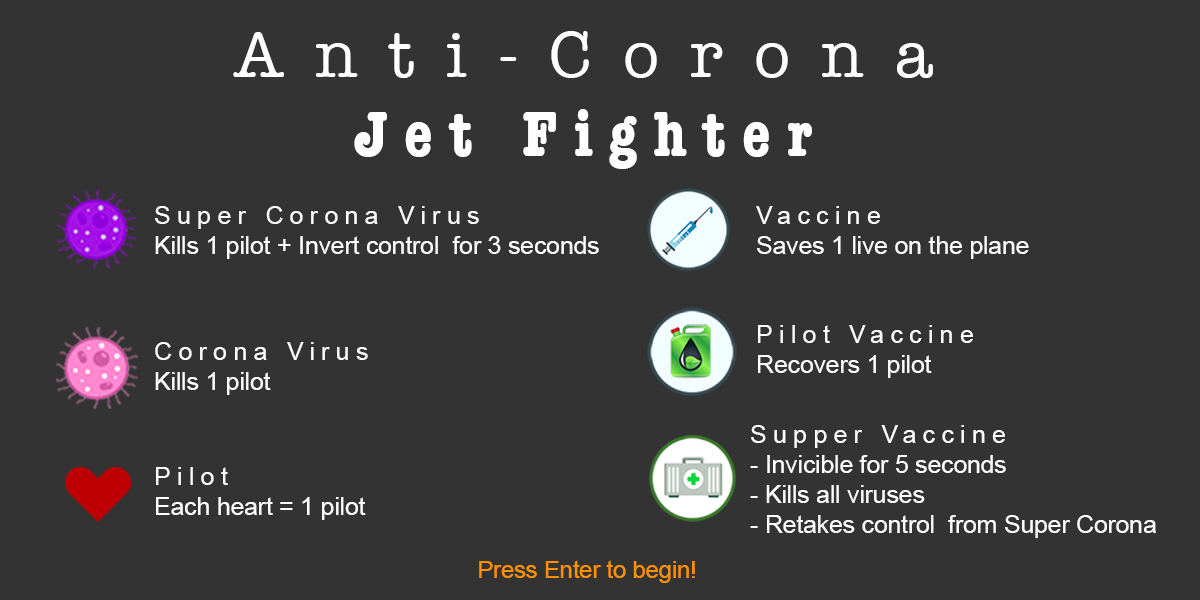
<style>
.page{position:relative;width:1200px;height:600px;background:#333333}
.page>*{position:absolute;margin:0}
.t1{font:66.3px "AmericanTypewriter";letter-spacing:0.47em;color:#ffffff}
.t2{font:66.3px "AmericanTypewriter-CondensedBold";letter-spacing:0.25em;color:#ffffff}
.t3{font:25px "ArialMT";letter-spacing:-0.01em;color:#ffffff}
.t4{font:25px "ArialMT";letter-spacing:0.25em;color:#ffffff}
.t5{font:24px "ArialMT";letter-spacing:-0.01em;color:#ff9000}
</style>
<div class="page">
<p class="t1" style="left:233px;top:31px;width:700px;height:138px;text-align:center">Anti-Corona<br><span class="t2">Jet Fighter</span></p>
<p class="t3" style="left:155px;top:206px;width:444px;height:53px"><span class="t4">Super Corona Virus<br></span>Kills 1 pilot + Invert control  for 3 seconds</p>
<p class="t3" style="left:756px;top:206px;width:273px;height:53px"><span class="t4">Vaccine<br></span>Saves 1 live on the plane</p>
<p class="t3" style="left:758px;top:325px;width:215px;height:53px"><span class="t4">Pilot Vaccine<br></span>Recovers 1 pilot</p>
<p class="t3" style="left:155px;top:342px;width:213px;height:53px"><span class="t4">Corona Virus<br></span>Kills 1 pilot</p>
<p class="t3" style="left:750px;top:425px;width:406px;height:113px"><span class="t4">Supper Vaccine<br></span>- Invicible for 5 seconds<br>- Kills all viruses<br>- Retakes control  from Super Corona</p>
<p class="t3" style="left:156px;top:467px;width:210px;height:53px"><span class="t4">Pilot<br></span>Each heart = 1 pilot</p>
<p class="t5" style="left:479px;top:560px;width:216px;height:23px">Press Enter to begin!</p>
</div>
